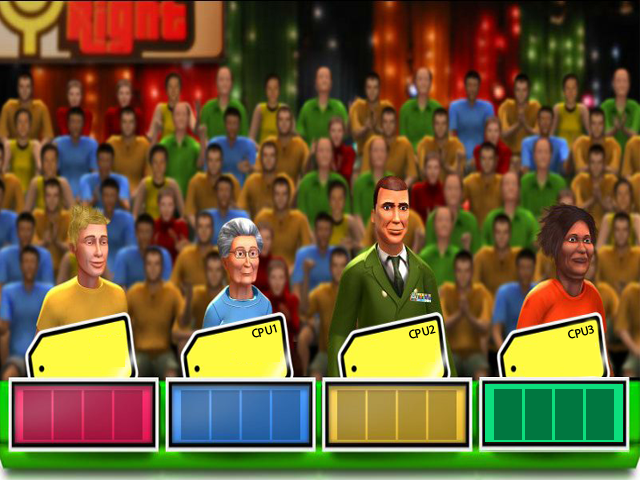
<style>
.page{position:relative;width:640px;height:480px}
.page>*{position:absolute;margin:0}
.t1{font:12px "MyriadPro-Regular";color:#000000}
</style>
<div class="page">
<p class="t1" style="left:252px;top:324px;width:25px;height:14px;rotate:-14deg">CPU1</p>
<p class="t1" style="left:409px;top:325px;width:27px;height:14px;rotate:-14deg">CPU2</p>
<p class="t1" style="left:568px;top:325px;width:26px;height:14px;rotate:-14deg">CPU3</p>
</div>
